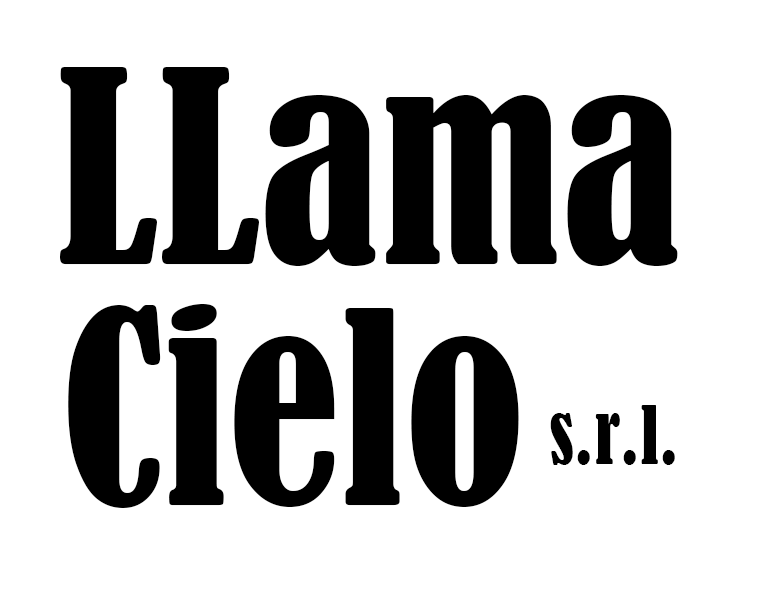
<style>
.page{position:relative;width:760px;height:600px;background:#ffffff}
.page>*{position:absolute;margin:0}
.t1{font:250px "BernardMT-Condensed";color:#000000}
.t2{font:75px "BernardMT-Condensed";color:#000000}
</style>
<div class="page">
<p class="t1" style="left:60px;top:67px;width:618px;height:199px">LLama</p>
<p class="t1" style="left:68px;top:304px;width:451px;height:204px">Cielo</p>
<p class="t2" style="left:550px;top:405px;width:125px;height:60px">s.r.l.</p>
</div>
